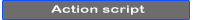
<style>
.page{position:relative;width:224px;height:20px;background:#6e6c6c}
.page>*{position:absolute;margin:0}
.t1{font:10.2px "ArialRoundedMTBold";color:#fcfcfc;scale:1.47 1}
</style>
<div class="page">
<p class="t1" style="left:51px;top:5px;width:94px;height:10px">Action script</p>
</div>
